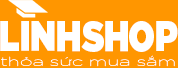
<style>
.page{position:relative;width:178px;height:68px;background:#ff9600}
.page>*{position:absolute;margin:0}
.t1{font:42.5px "iCielGotham-Ultra";color:#ffffff;scale:0.79 1}
.t2{font:12.4px "iCielGotham-Thin";color:#ffffff;scale:1.63 1}
</style>
<div class="page">
<p class="t1" style="left:0px;top:21px;width:178px;height:31px">LINHSHOP</p>
<p class="t2" style="left:1px;top:55px;width:174px;height:12px">thỏa sức mua sắm</p>
</div>
